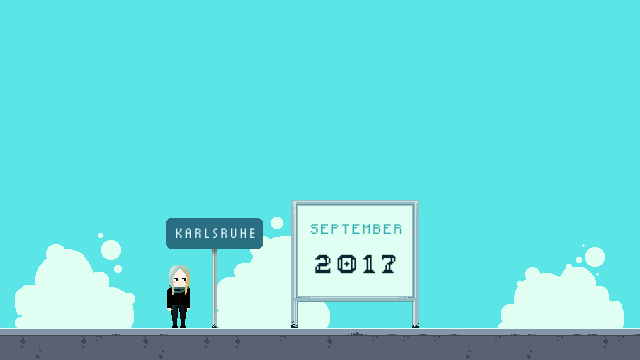
<style>
.page{position:relative;width:640px;height:360px;background:#5ce5e6}
.page>*{position:absolute;margin:0}
.t1{font:14px "Munro";letter-spacing:0.2em;color:#d8f3ff}
.t2{font:11px "Minecraftia-Regular";letter-spacing:0.2em;color:#2bb1b2}
.t3{font:27px "Frikativ";letter-spacing:0.2em;color:#032630}
</style>
<div class="page">
<p class="t1" style="left:176px;top:228px;width:79px;height:10px">KARLSRUHE</p>
<p class="t2" style="left:310px;top:224px;width:92px;height:10px">SEPTEMBER</p>
<p class="t3" style="left:315px;top:254px;width:81px;height:20px">2017</p>
</div>
